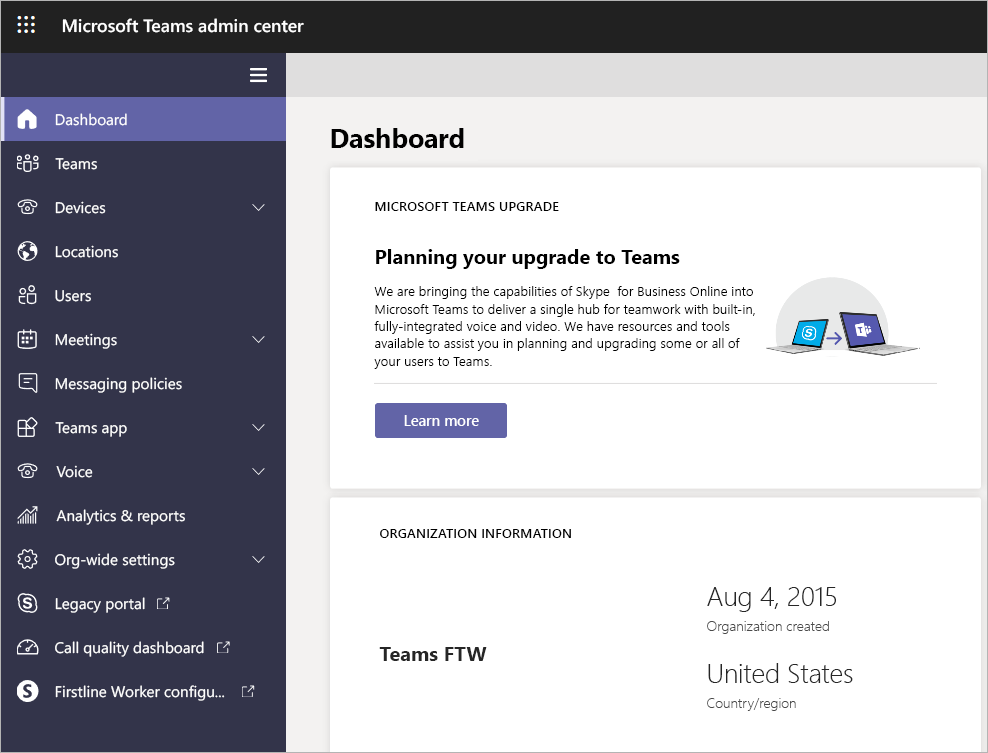
<style>
.page{position:relative;width:988px;height:753px;background:#ffffff}
.page>*{position:absolute;margin:0}
.t1{font:17.7px "SegoeUI-Semibold";color:#ffffff}
.t2{font:15.3px "SegoeUI";color:#ffffff}
.t3{font:26.7px "SegoeUI-Bold";color:#010101}
.t4{font:13.3px "SegoeUI-Semibold";color:#000000}
.t5{font:20px "SegoeUI-Bold";color:#000000}
.t6{font:13.5px/17.3px "SegoeUI-Semilight";color:#000000}
.t7{font:14.7px "SegoeUI-Semibold";color:#ffffff}
.t8{font:26.7px "SegoeUI-Light";color:#262626}
.t9{font:14px "SegoeUI-Light";color:#4a4a4a}
.t10{font:20px "SegoeUI-Bold";color:#262626}
</style>
<div class="page">
<p class="t1" style="left:62px;top:18px;width:242px;height:15px">Microsoft Teams admin center</p>
<p class="t2" style="left:55px;top:113px;width:72px;height:13px">Dashboard</p>
<p class="t3" style="left:331px;top:128px;width:133px;height:20px">Dashboard</p>
<p class="t2" style="left:55px;top:158px;width:42px;height:12px">Teams</p>
<p class="t2" style="left:55px;top:201px;width:51px;height:13px">Devices</p>
<p class="t4" style="left:375px;top:202px;width:184px;height:9px">MICROSOFT TEAMS UPGRADE</p>
<p class="t2" style="left:55px;top:245px;width:63px;height:13px">Locations</p>
<p class="t5" style="left:376px;top:249px;width:304px;height:20px">Planning your upgrade to Teams</p>
<p class="t2" style="left:55px;top:290px;width:36px;height:12px">Users</p>
<p class="t6" style="left:374px;top:286px;width:381px;height:83px">We are bringing the capabilities of Skype  for Business Online into<br>Microsoft Teams to deliver a single hub for teamwork with built-in,<br>fully-integrated voice and video. We have resources and tools<br>available to assist you in planning and upgrading some or all of<br>your users to Teams.</p>
<p class="t2" style="left:55px;top:333px;width:62px;height:16px">Meetings</p>
<p class="t2" style="left:55px;top:377px;width:127px;height:16px">Messaging policies</p>
<p class="t2" style="left:55px;top:422px;width:72px;height:15px">Teams app</p>
<p class="t7" style="left:404px;top:415px;width:75px;height:11px">Learn more</p>
<p class="t2" style="left:56px;top:465px;width:37px;height:13px">Voice</p>
<p class="t2" style="left:56px;top:509px;width:129px;height:16px">Analytics &amp; reports</p>
<p class="t4" style="left:380px;top:529px;width:191px;height:9px">ORGANIZATION INFORMATION</p>
<p class="t2" style="left:55px;top:553px;width:120px;height:16px">Org-wide settings</p>
<p class="t8" style="left:707px;top:587px;width:129px;height:25px">Aug 4, 2015</p>
<p class="t2" style="left:55px;top:597px;width:90px;height:16px">Legacy portal</p>
<p class="t9" style="left:707px;top:621px;width:122px;height:13px">Organization created</p>
<p class="t2" style="left:55px;top:641px;width:149px;height:16px">Call quality dashboard</p>
<p class="t10" style="left:379px;top:647px;width:108px;height:14px">Teams FTW</p>
<p class="t8" style="left:708px;top:663px;width:145px;height:20px">United States</p>
<p class="t2" style="left:55px;top:685px;width:170px;height:16px">Firstline Worker configu...</p>
<p class="t9" style="left:707px;top:698px;width:89px;height:13px">Country/region</p>
</div>
